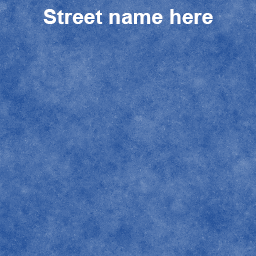
<style>
.page{position:relative;width:256px;height:256px}
.page>*{position:absolute;margin:0}
.t1{font:21px "Arial-BoldMT";color:#ffffff}
</style>
<div class="page">
<p class="t1" style="left:43px;top:9px;width:170px;height:15px">Street name here</p>
</div>
